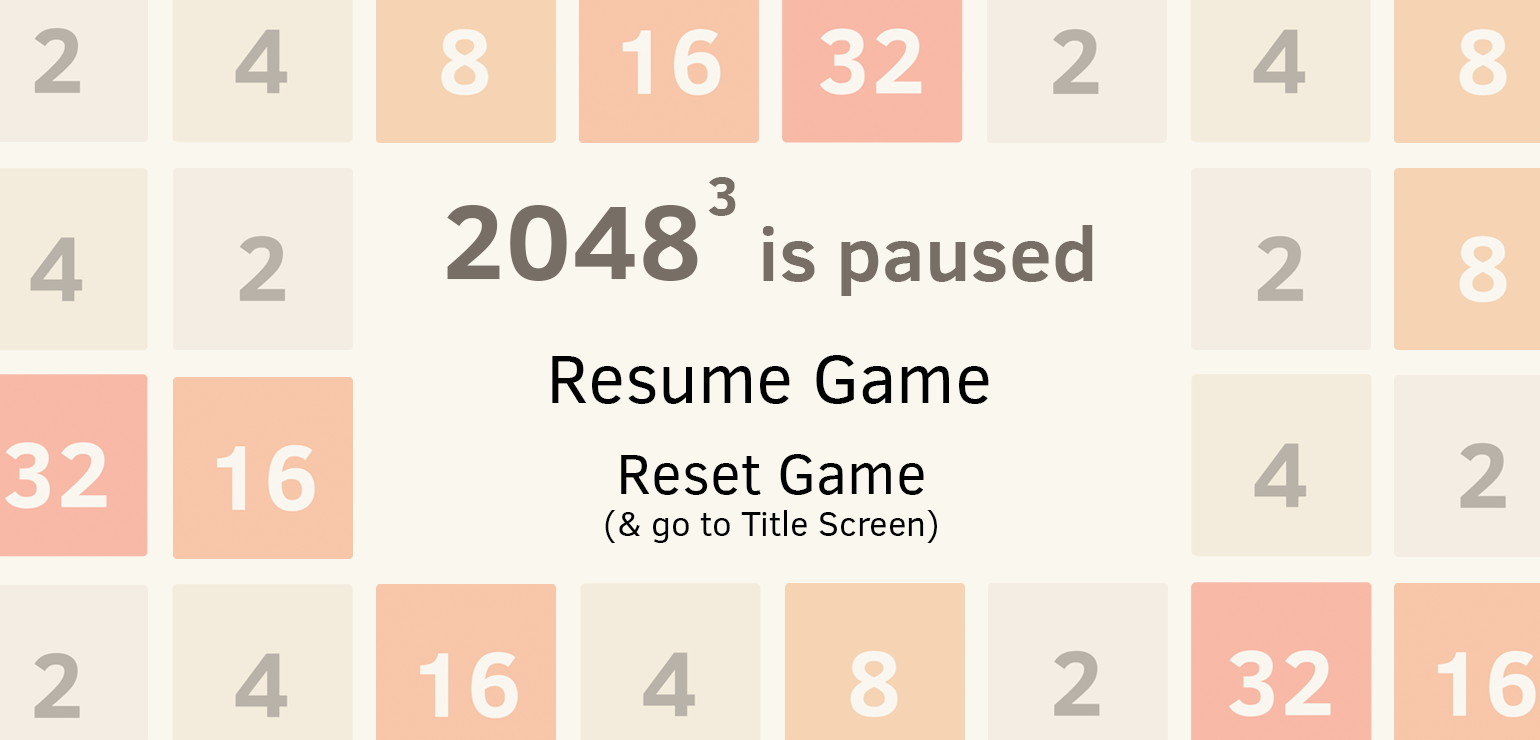
<style>
.page{position:relative;width:1540px;height:740px;background:#faf7ee}
.page>*{position:absolute;margin:0}
.t1{font:54.8px "ClearSans-Bold";color:#776e65}
.t2{font:107.1px "ClearSans-Bold";color:#776e65}
.t3{font:77.2px "ClearSans-Bold";color:#776e65}
.t4{font:69.7px "ClearSans";color:#000000}
.t5{font:34.8px "ClearSans";color:#000000}
.t6{font:58.1px "ClearSans";color:#000000}
</style>
<div class="page">
<p class="t1" style="left:708px;top:177px;width:28px;height:39px">3</p>
<p class="t2" style="left:447px;top:205px;width:251px;height:76px">2048</p>
<p class="t3" style="left:762px;top:225px;width:331px;height:71px">is paused</p>
<p class="t4" style="left:552px;top:355px;width:437px;height:49px">Resume Game</p>
<p class="t5" style="left:605px;top:454px;width:332px;height:89px;text-align:center"><span class="t6">Reset Game<br></span>(&amp; go to Title Screen)</p>
</div>
